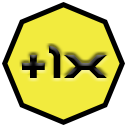
<style>
.page{position:relative;width:128px;height:128px;background:#f2eb3e}
.page>*{position:absolute;margin:0}
.t1{font:58.3px "moonhouse";color:#000000}
</style>
<div class="page">
<p class="t1" style="left:22px;top:46px;width:85px;height:32px">+1x</p>
</div>
